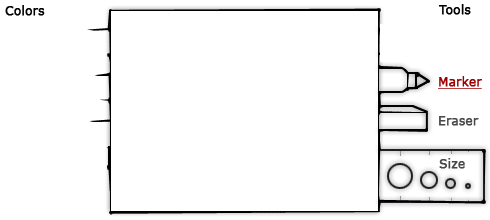
<style>
.page{position:relative;width:490px;height:220px;background:#ffffff}
.page>*{position:absolute;margin:0}
.t1{font:12px "Verdana";color:#000000;font-weight:bold}
.t2{font:12px "Verdana";color:#010101;font-weight:bold}
.t3{font:12px "Verdana";color:#9b0101;font-weight:bold;text-decoration:underline}
.t4{font:12px "Verdana";color:#494949;font-weight:bold}
</style>
<div class="page">
<p class="t1" style="left:5px;top:5px;width:40px;height:11px">Colors</p>
<p class="t2" style="left:438px;top:4px;width:33px;height:11px">Tools</p>
<p class="t3" style="left:438px;top:76px;width:44px;height:13px">Marker</p>
<p class="t4" style="left:439px;top:116px;width:40px;height:10px">Eraser</p>
<p class="t4" style="left:439px;top:158px;width:26px;height:11px">Size</p>
</div>
